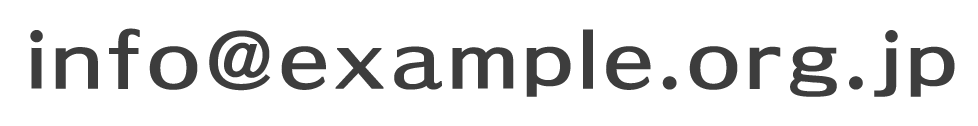
<style>
.page{position:relative;width:978px;height:126px;background:#ffffff}
.page>*{position:absolute;margin:0}
.t1{font:76px "C4-GothicDeux-E-04";letter-spacing:0.1em;color:#3d3d3d}
</style>
<div class="page">
<p class="t1" style="left:30px;top:28px;width:925px;height:69px">info@example.org.jp</p>
</div>
